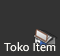
<style>
.page{position:relative;width:60px;height:56px;background:#333333}
.page>*{position:absolute;margin:0}
.t1{font:12px "AdobeClean-Regular";color:#fffef9}
</style>
<div class="page">
<p class="t1" style="left:4px;top:42px;width:52px;height:10px">Toko Item</p>
</div>
